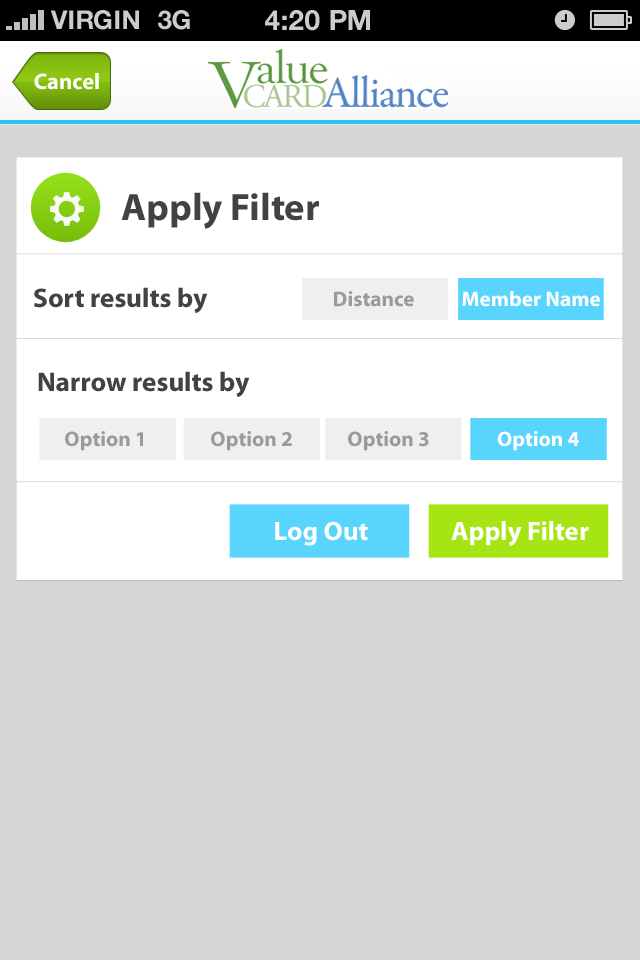
<style>
.page{position:relative;width:640px;height:960px;background:#d6d6d6}
.page>*{position:absolute;margin:0}
.t1{font:26px "HelveticaNeue-Bold";color:#cccccc;text-transform:uppercase}
.t2{font:28px "HelveticaNeue-Bold";color:#cccccc;text-transform:uppercase}
.t3{font:22.6px "MyriadPro-Bold";color:#ffffff}
.t4{font:38.4px "MyriadPro-Bold";color:#424242}
.t5{font:27.2px "MyriadPro-Bold";color:#424242}
.t6{font:21.2px "MyriadPro-Bold";color:#9a9a9a}
.t7{font:21.2px "MyriadPro-Bold";color:#ffffff}
.t8{font:26.7px "MyriadPro-Bold";color:#ffffff}
</style>
<div class="page">
<p class="t1" style="left:50px;top:10px;width:89px;height:20px">VIRGIN</p>
<p class="t1" style="left:158px;top:10px;width:32px;height:20px">3G</p>
<p class="t2" style="left:265px;top:10px;width:105px;height:21px">4:20 pM</p>
<p class="t3" style="left:34px;top:73px;width:65px;height:17px">Cancel</p>
<p class="t4" style="left:121px;top:192px;width:198px;height:37px">Apply Filter</p>
<p class="t5" style="left:34px;top:287px;width:174px;height:26px">Sort results by</p>
<p class="t6" style="left:334px;top:291px;width:80px;height:16px">Distance</p>
<p class="t7" style="left:462px;top:291px;width:138px;height:16px">Member Name</p>
<p class="t5" style="left:38px;top:371px;width:212px;height:26px">Narrow results by</p>
<p class="t6" style="left:65px;top:431px;width:78px;height:20px">Option 1</p>
<p class="t6" style="left:211px;top:431px;width:81px;height:20px">Option 2</p>
<p class="t6" style="left:348px;top:431px;width:81px;height:20px">Option 3</p>
<p class="t7" style="left:497px;top:431px;width:82px;height:20px">Option 4</p>
<p class="t8" style="left:275px;top:521px;width:93px;height:25px">Log Out</p>
<p class="t8" style="left:451px;top:521px;width:138px;height:25px">Apply Filter</p>
</div>
